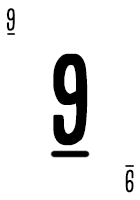
<style>
.page{position:relative;width:140px;height:200px;background:#ffffff}
.page>*{position:absolute;margin:0}
.t1{font:28.7px "CardenioModern-Reg";letter-spacing:-0.1em;color:#000000;text-transform:uppercase;font-weight:bold;scale:0.87 1}
.t2{font:115px "CardenioModern-Bold";letter-spacing:-0.1em;color:#000000;text-transform:uppercase;font-weight:bold;scale:0.87 1}
</style>
<div class="page">
<p class="t1" style="left:6px;top:8px;width:9px;height:23px">9</p>
<p class="t2" style="left:53px;top:53px;width:35px;height:93px">9</p>
<p class="t1" style="left:125px;top:169px;width:9px;height:24px;rotate:180deg">9</p>
</div>
